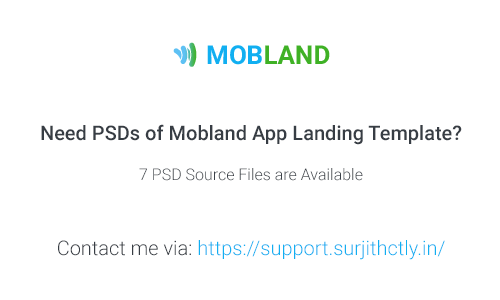
<style>
.page{position:relative;width:500px;height:300px;background:#ffffff}
.page>*{position:absolute;margin:0}
.t1{font:20px "Roboto-Medium";color:#373d44}
.t2{font:16px "Roboto-Light";color:#373d44}
.t3{font:20px "Roboto-Light";color:#11aff1}
.t4{font:20px "Roboto-Light";color:#373d44}
</style>
<div class="page">
<p class="t1" style="left:41px;top:124px;width:421px;height:21px">Need PSDs of Mobland App Landing Template?</p>
<p class="t2" style="left:139px;top:168px;width:224px;height:13px">7 PSD Source Files are Available</p>
<p class="t3" style="left:58px;top:240px;width:387px;height:20px"><span class="t4">Contact me via: </span>https://support.surjithctly.in/</p>
</div>
